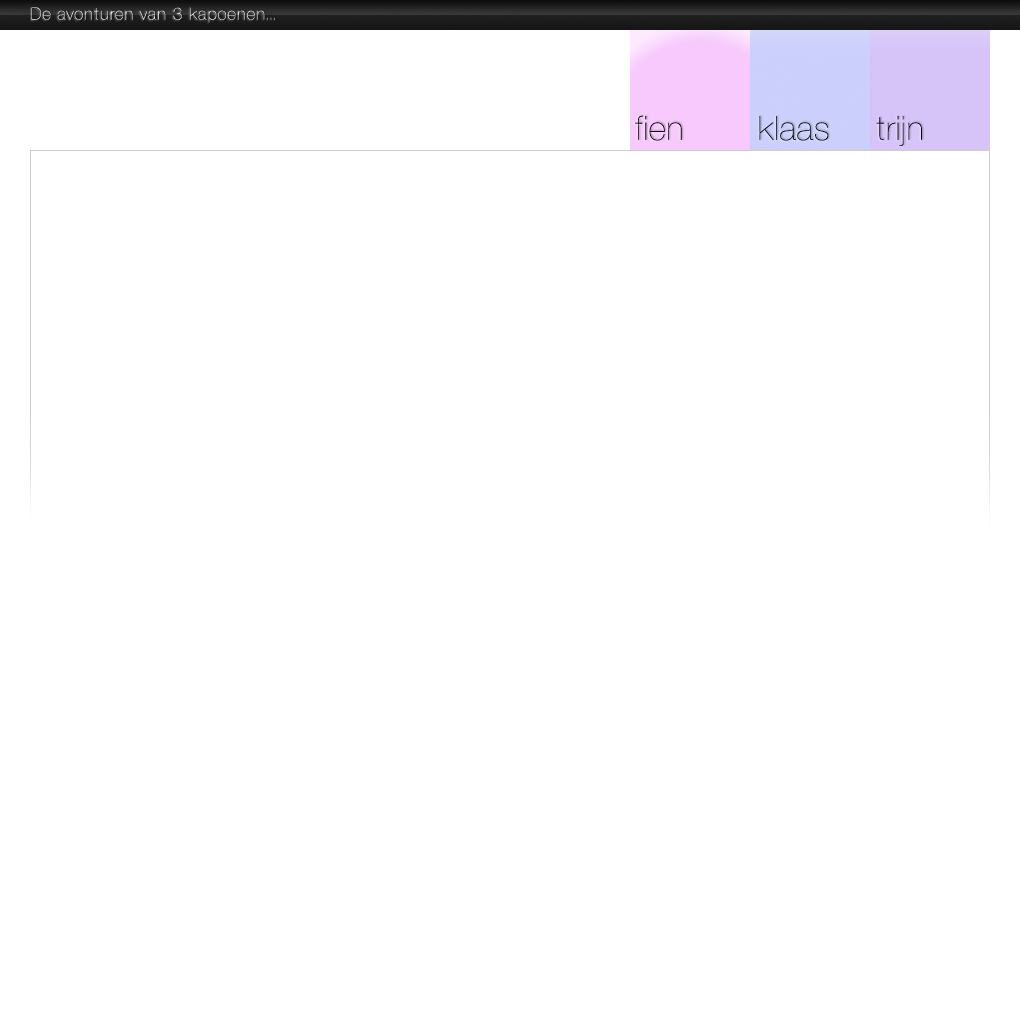
<style>
.page{position:relative;width:1020px;height:1020px;background:#ffffff}
.page>*{position:absolute;margin:0}
.t1{font:18px "NimbusSanD-UltLig";letter-spacing:0.05em;color:#ffffff}
.t2{font:36px "NimbusSanD-UltLig";color:#000000}
</style>
<div class="page">
<p class="t1" style="left:31px;top:7px;width:244px;height:16px">De avonturen van 3 kapoenen...</p>
<p class="t2" style="left:635px;top:115px;width:47px;height:26px">fien</p>
<p class="t2" style="left:759px;top:116px;width:70px;height:25px">klaas</p>
<p class="t2" style="left:876px;top:116px;width:46px;height:30px">trijn</p>
</div>
